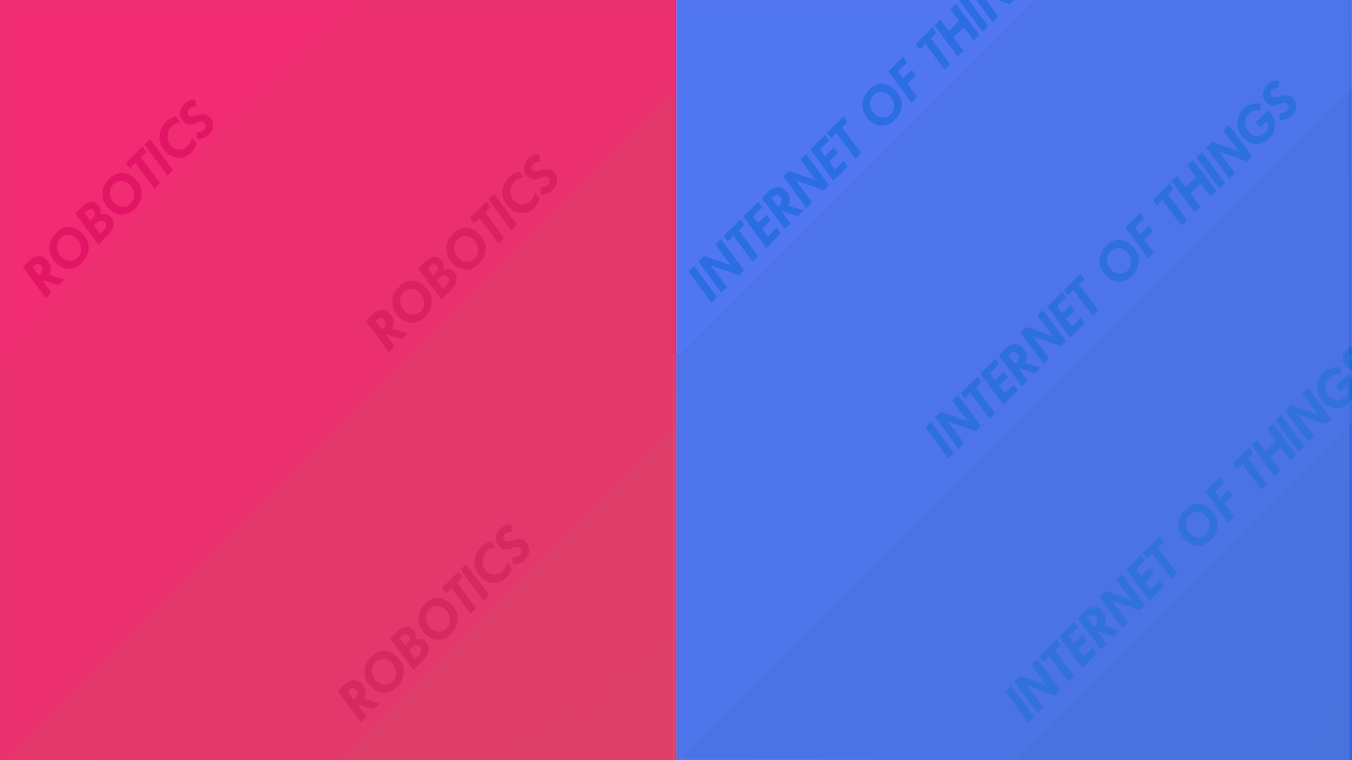
<style>
.page{position:relative;width:1352px;height:760px;background:#eb2f6f}
.page>*{position:absolute;margin:0}
.t1{font:59.6px "TwCenMT-BoldItalic";color:#2d6fde}
.t2{font:59.6px "TwCenMT-BoldItalic";color:#e31666}
.t3{font:59.6px "TwCenMT-BoldItalic";color:#dc2163}
.t4{font:59.6px "TwCenMT-BoldItalic";color:#d52a60}
</style>
<div class="page">
<p class="t1" style="left:925px;top:80px;width:371px;height:379px;rotate:-45deg">INTERNET OF THINGS</p>
<p class="t2" style="left:22px;top:99px;width:191px;height:200px;rotate:-45deg">ROBOTICS</p>
<p class="t3" style="left:365px;top:154px;width:192px;height:199px;rotate:-45deg">ROBOTICS</p>
<p class="t4" style="left:337px;top:524px;width:192px;height:199px;rotate:-45deg">ROBOTICS</p>
</div>
